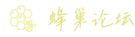
<style>
.page{position:relative;width:135px;height:37px;background:#ffffff}
.page>*{position:absolute;margin:0}
.t1{font:22px "AaYueRanTi";color:#e5e58d}
</style>
<div class="page">
<p class="t1" style="left:48px;top:6px;width:86px;height:26px">蜂巢论坛</p>
</div>
